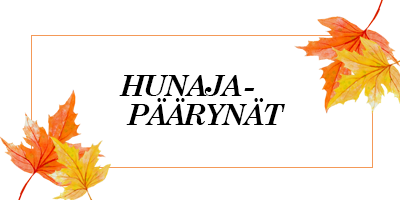
<style>
.page{position:relative;width:400px;height:200px;background:#ffffff}
.page>*{position:absolute;margin:0}
.t1{font:29.2px/29.2px "CenturySchoolbook-BoldItalic";letter-spacing:-0.1em;color:#000000}
</style>
<div class="page">
<p class="t1" style="left:119px;top:75px;width:166px;height:50px;text-align:center">HUNAJA -<br> PÄÄRYNÄT</p>
</div>
